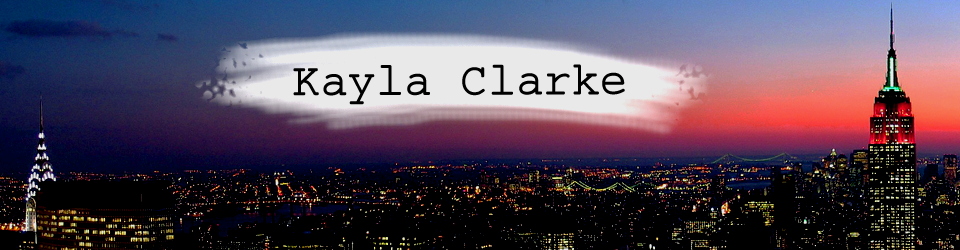
<style>
.page{position:relative;width:960px;height:250px;background:#000000}
.page>*{position:absolute;margin:0}
.t1{font:80px "CourierFinalDraft";color:#000000}
</style>
<div class="page">
<p class="t1" style="left:293px;top:64px;width:332px;height:41px">Kayla Clarke</p>
</div>
